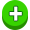
<style>
.page{position:relative;width:30px;height:30px;background:#37d300}
.page>*{position:absolute;margin:0}
.t1{font:27.6px "MagicR-HM";color:#ffffff}
</style>
<div class="page">
<p class="t1" style="left:9px;top:6px;width:13px;height:15px">+</p>
</div>
